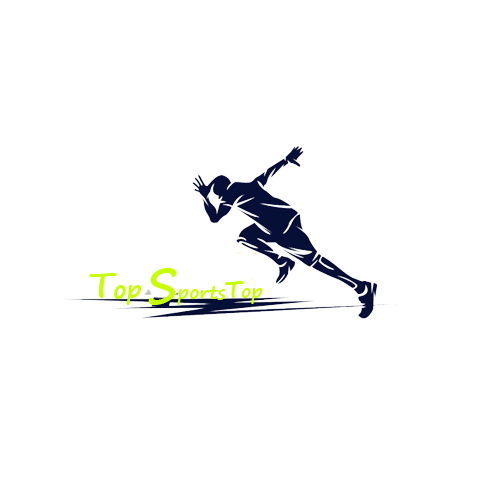
<style>
.page{position:relative;width:500px;height:500px;background:#ffffff}
.page>*{position:absolute;margin:0}
.t1{font:48px "SegoePrint-Bold";color:#c6ff00}
.t2{font:24px "SegoePrint-Bold";color:#c6ff00}
.t3{font:36px "SegoePrint-Bold";color:#c6ff00}
.t4{font:18px "SegoePrint-Bold";color:#c6ff00}
</style>
<div class="page">
<p class="t1" style="left:148px;top:268px;width:29px;height:37px">S</p>
<p class="t2" style="left:89px;top:273px;width:52px;height:32px"><span class="t3">T</span>op</p>
<p class="t4" style="left:225px;top:281px;width:38px;height:23px"><span class="t2">T</span>op</p>
<p class="t4" style="left:177px;top:286px;width:48px;height:19px">ports</p>
</div>
